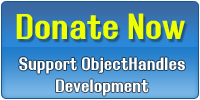
<style>
.page{position:relative;width:200px;height:100px}
.page>*{position:absolute;margin:0}
.t1{font:36px "RolloutBold";color:#f0ff00}
.t2{font:18px "RolloutBold";color:#ffffff}
</style>
<div class="page">
<p class="t1" style="left:16px;top:13px;width:169px;height:27px">Donate Now</p>
<p class="t2" style="left:19px;top:57px;width:166px;height:39px;text-align:center">Support ObjectHandles<br>Development</p>
</div>
